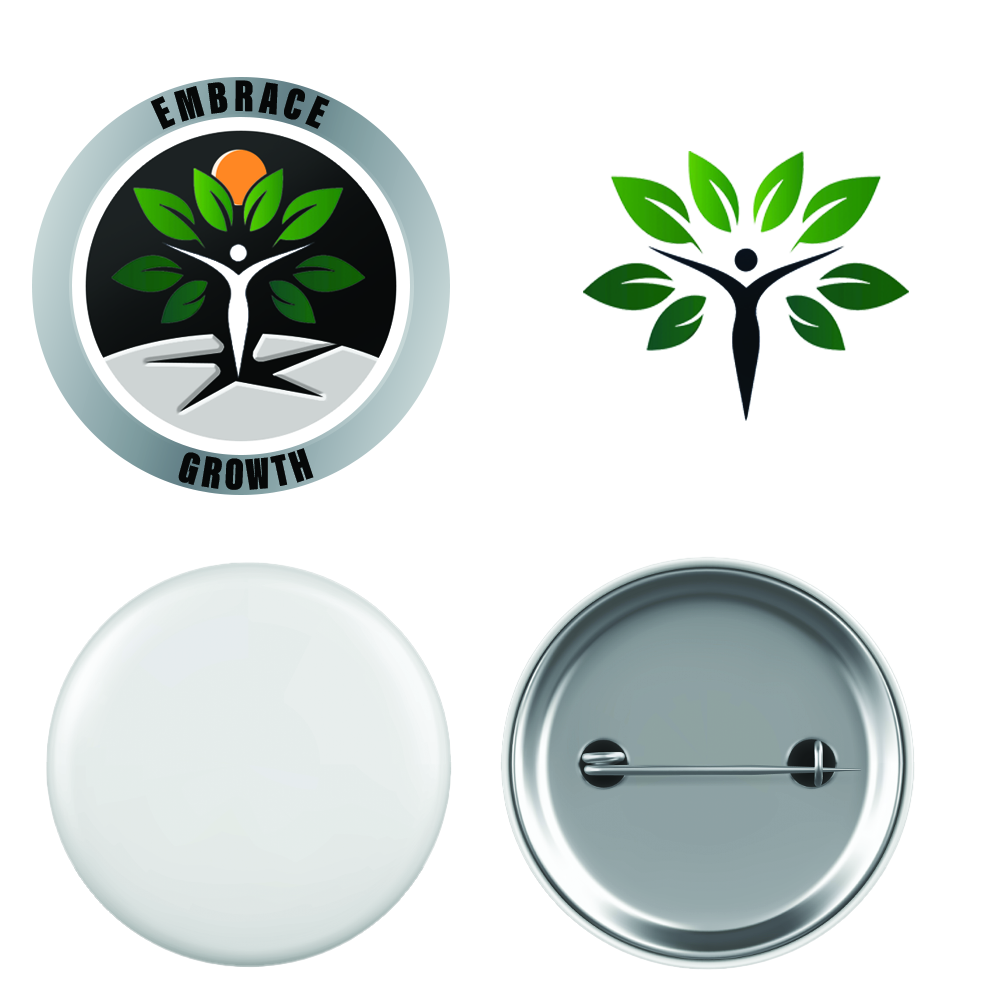
<style>
.page{position:relative;width:1000px;height:1000px;background:#ffffff}
.page>*{position:absolute;margin:0}
.t1{font:45.8px "AcuminConcept-ExtraCondensedUltraBlack";letter-spacing:0.1em;color:#060808}
</style>
<div class="page">
<p class="t1" style="left:150px;top:80px;width:180px;height:50px">EMBRACE</p>
<p class="t1" style="left:178px;top:448px;width:136px;height:42px">GROWTH</p>
</div>
